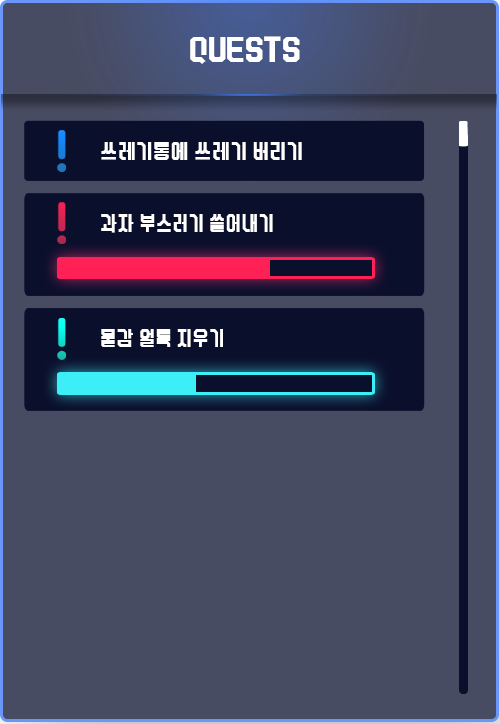
<style>
.page{position:relative;width:500px;height:724px;background:#484c63}
.page>*{position:absolute;margin:0}
.t1{font:34.2px "PassionItself";color:#ffffff;scale:1.08 1}
.t2{font:24.1px "PassionItself";letter-spacing:0.06em;color:#ffffff;scale:1.07 1}
.t3{font:24.1px "PassionItself";letter-spacing:0.06em;color:#ffffff}
</style>
<div class="page">
<p class="t1" style="left:190px;top:36px;width:110px;height:28px">QUESTS</p>
<p class="t2" style="left:101px;top:142px;width:201px;height:18px">쓰레기통에 쓰레기 버리기</p>
<p class="t3" style="left:101px;top:214px;width:172px;height:19px">과자 부스러기 쓸어내기</p>
<p class="t3" style="left:101px;top:329px;width:122px;height:18px">물감 얼룩 지우기</p>
</div>
